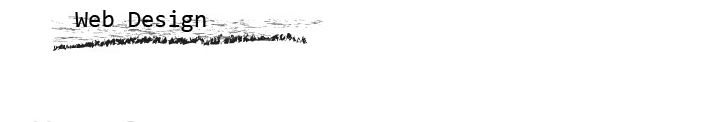
<style>
.page{position:relative;width:707px;height:122px;background:#ffffff}
.page>*{position:absolute;margin:0}
.t1{font:24px "Consolas";color:#030303}
</style>
<div class="page">
<p class="t1" style="left:75px;top:10px;width:131px;height:22px">Web Design</p>
</div>
